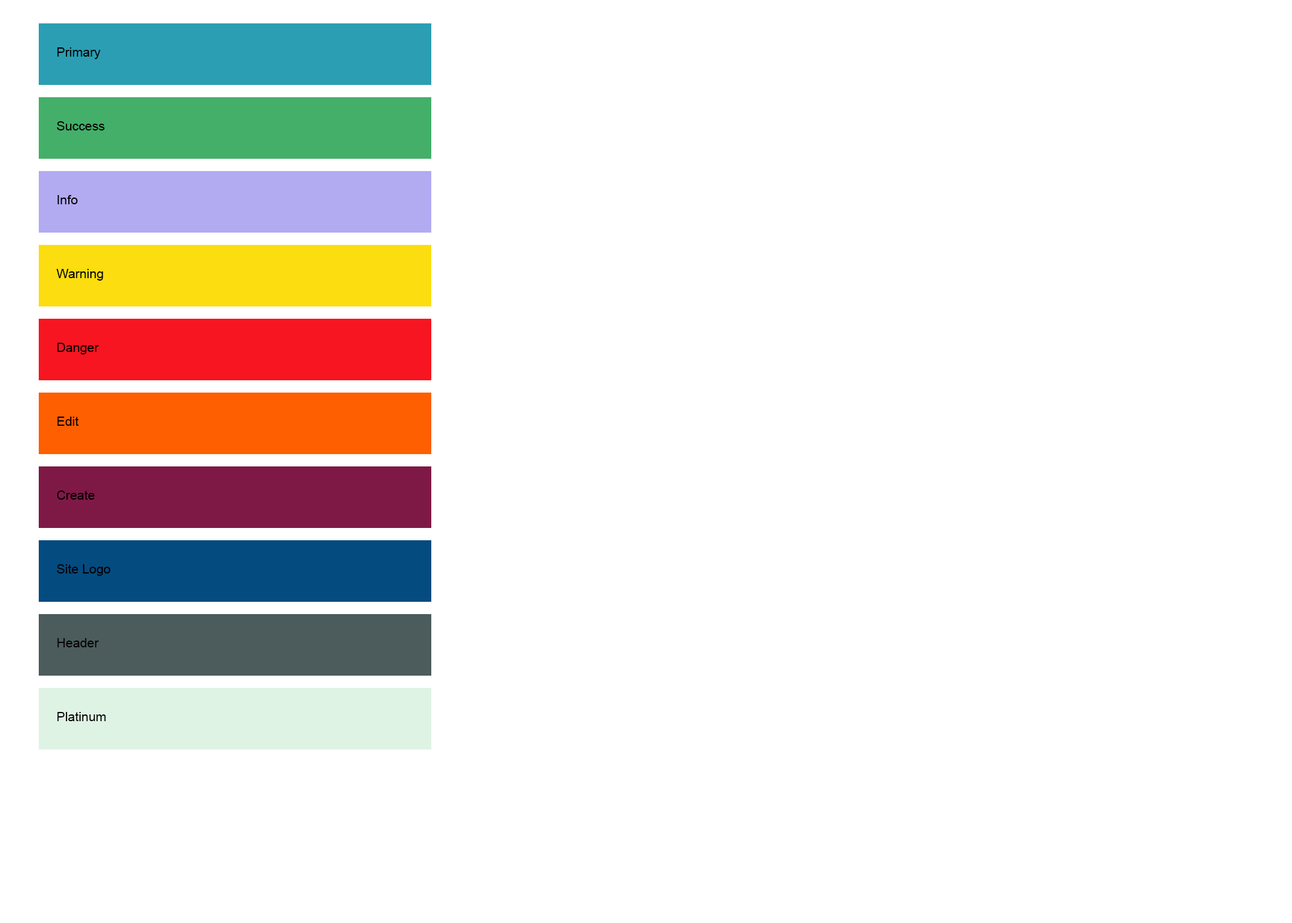
<style>
.page{position:relative;width:1292px;height:923px;background:#ffffff}
.page>*{position:absolute;margin:0}
.t1{font:12.8px "ArialMT";color:#000000}
</style>
<div class="page">
<p class="t1" style="left:57px;top:47px;width:44px;height:12px">Primary</p>
<p class="t1" style="left:57px;top:121px;width:48px;height:9px">Success</p>
<p class="t1" style="left:57px;top:195px;width:21px;height:9px">Info</p>
<p class="t1" style="left:57px;top:269px;width:46px;height:12px">Warning</p>
<p class="t1" style="left:57px;top:343px;width:42px;height:11px">Danger</p>
<p class="t1" style="left:57px;top:417px;width:22px;height:9px">Edit</p>
<p class="t1" style="left:57px;top:490px;width:38px;height:10px">Create</p>
<p class="t1" style="left:57px;top:564px;width:54px;height:12px">Site Logo</p>
<p class="t1" style="left:57px;top:638px;width:42px;height:9px">Header</p>
<p class="t1" style="left:57px;top:712px;width:49px;height:9px">Platinum</p>
</div>
